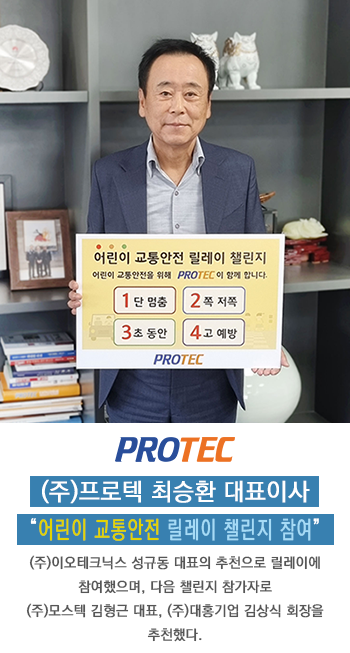
<style>
.page{position:relative;width:350px;height:653px;background:#ffffff}
.page>*{position:absolute;margin:0}
.t1{font:14px/24px "KoPubDotumMedium";color:#565656;font-weight:bold}
.t2{font:24px/38px "KoPubDotumMedium";color:#ffffff;font-weight:bold}
.t3{font:24px/38px "KoPubDotumMedium";letter-spacing:0.05em;color:#ffffff;font-weight:bold;scale:0.73 1}
.t4{font:24px/38px "KoPubDotumMedium";letter-spacing:0.05em;color:#e3d400;font-weight:bold;scale:0.73 1}
.t5{font:24px/38px "KoPubDotumMedium";letter-spacing:0.05em;color:#a6dbf6;font-weight:bold;scale:0.73 1}
</style>
<div class="page">
<p class="t1" style="left:26px;top:479px;width:298px;height:163px;text-align:center"><span class="t2">(주)프로텍 최승환 대표이사<br></span><span class="t3">“</span><span class="t4">어린이 교통안전 </span><span class="t5">릴레이 챌린지 참여</span><span class="t3">”<br></span>(주)이오테크닉스 성규동 대표의 추천으로 릴레이에<br>참여했으며, 다음 챌린지 참가자로<br>(주)모스텍 김형근 대표, (주)대홍기업 김상식 회장을<br>추천했다.</p>
</div>
